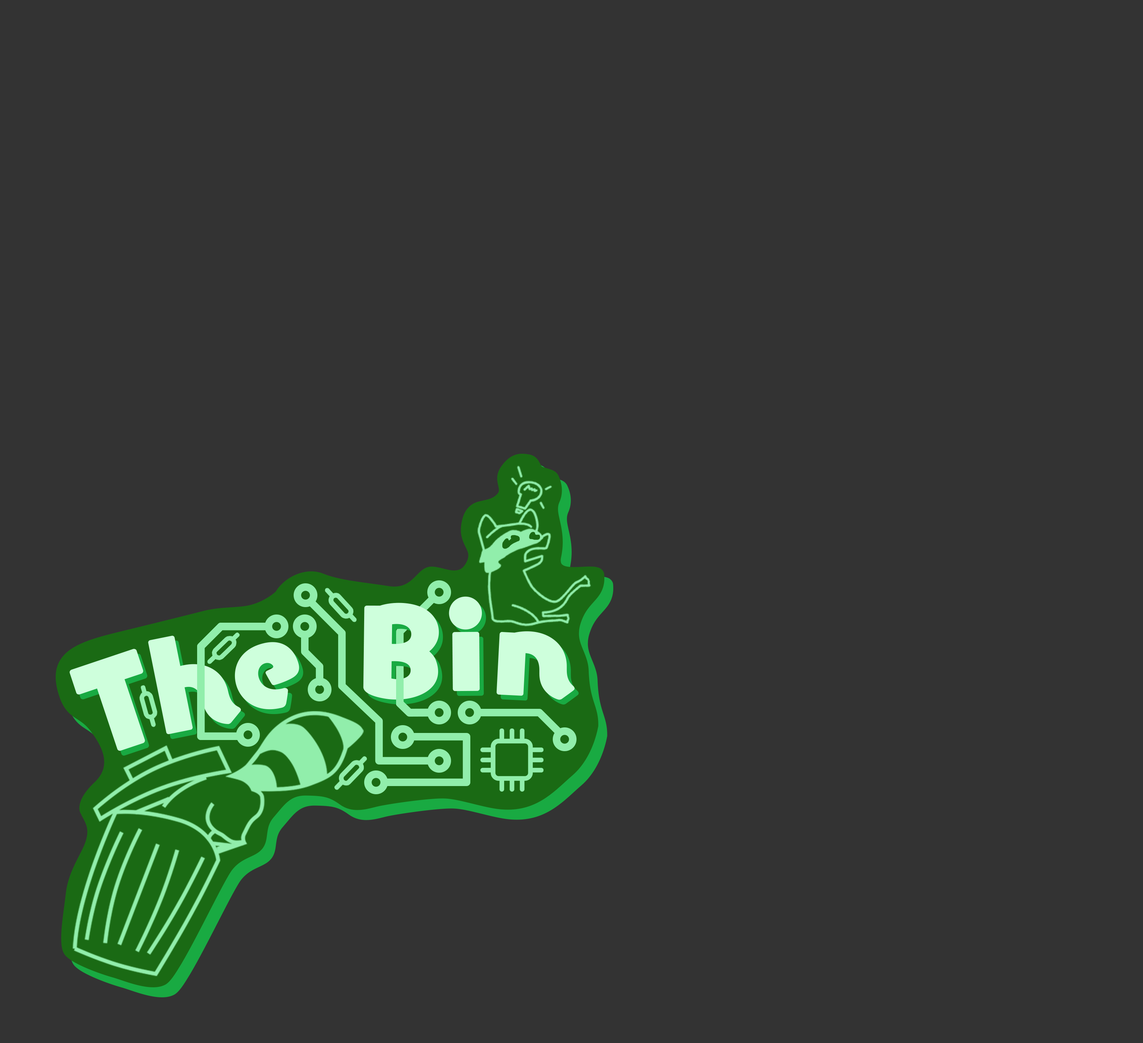
<style>
.page{position:relative;width:1143px;height:1043px;background:#333333}
.page>*{position:absolute;margin:0}
.t1{font:111.4px "YurukaStd-UB";color:#ceffdc}
</style>
<div class="page">
<p class="t1" style="left:363px;top:603px;width:76px;height:97px;rotate:4deg">B</p>
<p class="t1" style="left:449px;top:596px;width:33px;height:95px;rotate:2deg">i</p>
<p class="t1" style="left:148px;top:636px;width:93px;height:98px;rotate:-11deg">h</p>
<p class="t1" style="left:235px;top:642px;width:64px;height:68px;rotate:-12deg">e</p>
<p class="t1" style="left:496px;top:631px;width:79px;height:69px">n</p>
<p class="t1" style="left:69px;top:649px;width:76px;height:102px;rotate:-16deg">T</p>
</div>
